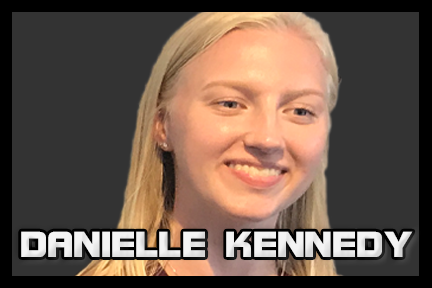
<style>
.page{position:relative;width:432px;height:288px;background:#333333}
.page>*{position:absolute;margin:0}
.t1{font:38.5px "BolsterBold";color:#f3f3f3}
</style>
<div class="page">
<p class="t1" style="left:21px;top:231px;width:392px;height:26px">DANIELLE KENNEDY</p>
</div>
